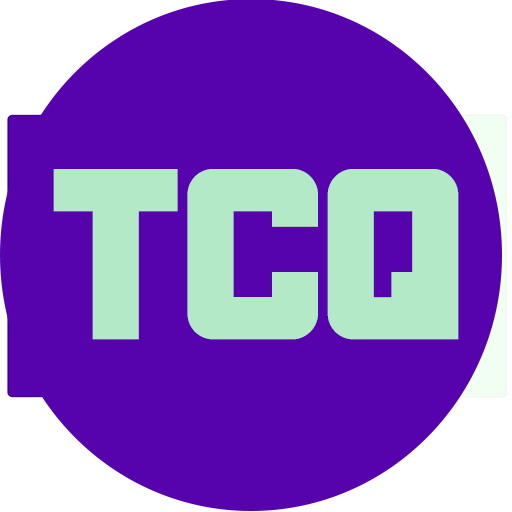
<style>
.page{position:relative;width:512px;height:512px;background:#5603ad}
.page>*{position:absolute;margin:0}
.t1{font:250px "BTBrikRegular";letter-spacing:-0.02em;color:#b3e9c7}
</style>
<div class="page">
<p class="t1" style="left:53px;top:169px;width:406px;height:171px">TCQ</p>
</div>
